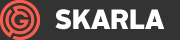
<style>
.page{position:relative;width:180px;height:40px;background:#333333}
.page>*{position:absolute;margin:0}
.t1{font:27.9px "AlrightSans-Black";letter-spacing:-0.01em;color:#ffffff;text-transform:uppercase}
</style>
<div class="page">
<p class="t1" style="left:55px;top:9px;width:110px;height:21px">Skarla</p>
</div>
